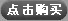
<style>
.page{position:relative;width:68px;height:21px;background:#ffffff}
.page>*{position:absolute;margin:0}
.t1{font:12.9px "SimHei";letter-spacing:0.02em;color:#ffffff;font-weight:bold}
</style>
<div class="page">
<p class="t1" style="left:7px;top:4px;width:55px;height:11px">点击购买</p>
</div>
